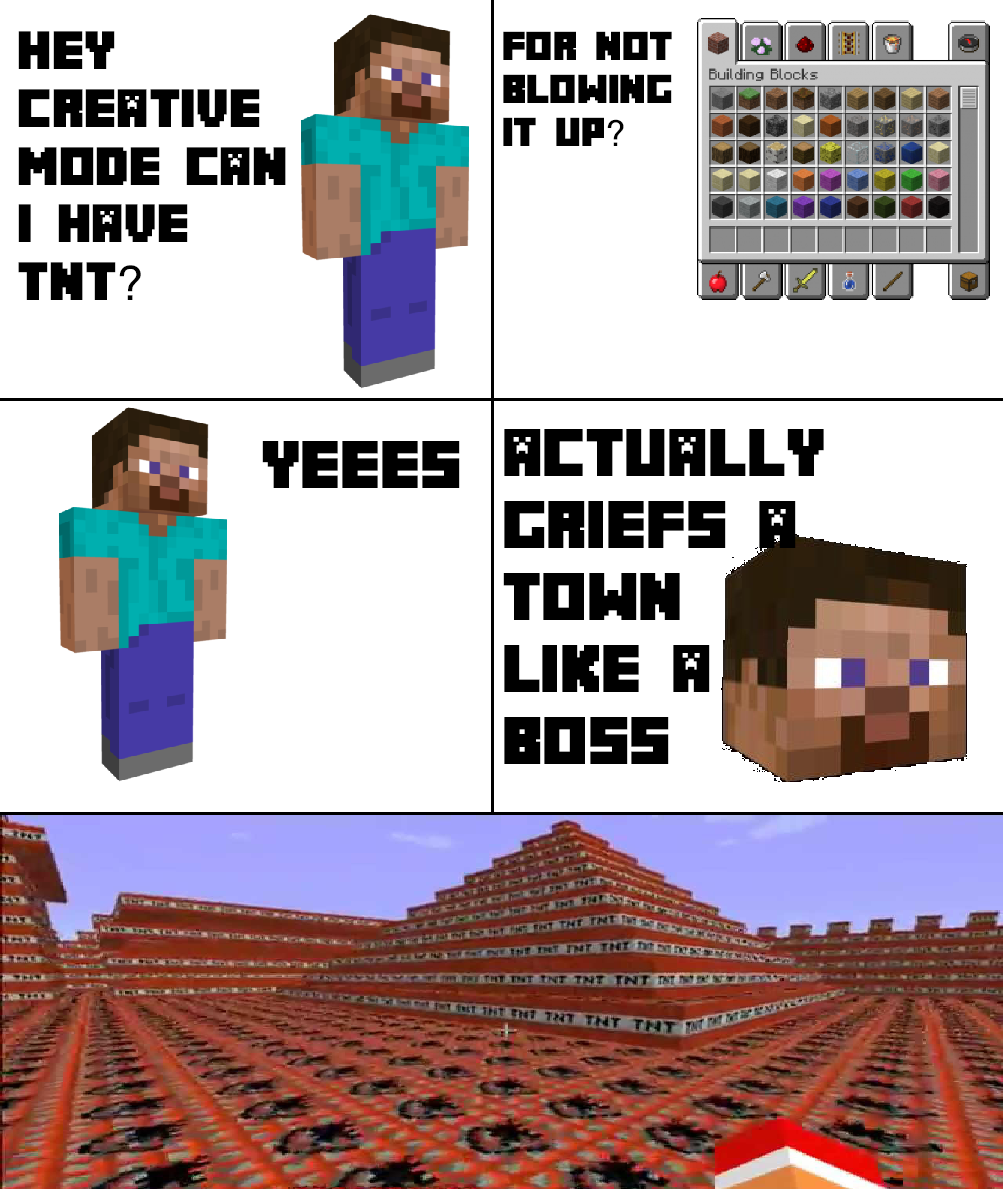
<style>
.page{position:relative;width:1003px;height:1189px;background:#ffffff}
.page>*{position:absolute;margin:0}
.t1{font:48px "Minecrafter";color:#000000}
.t2{font:48px "Helvetica";color:#000000}
.t3{font:36px "Minecrafter";color:#000000}
.t4{font:36px "Helvetica";color:#000000}
.t5{font:60px "Minecrafter";color:#000000}
</style>
<div class="page">
<p class="t1" style="left:18px;top:31px;width:268px;height:269px">hey <br>creative<br>mode can i have tnt<span class="t2">?</span></p>
<p class="t3" style="left:503px;top:31px;width:169px;height:115px">for not blowing it up<span class="t4">?</span></p>
<p class="t5" style="left:503px;top:429px;width:321px;height:335px">actually griefs a<br>town<br>like a<br>boss</p>
<p class="t5" style="left:262px;top:441px;width:198px;height:47px">yeees</p>
</div>
